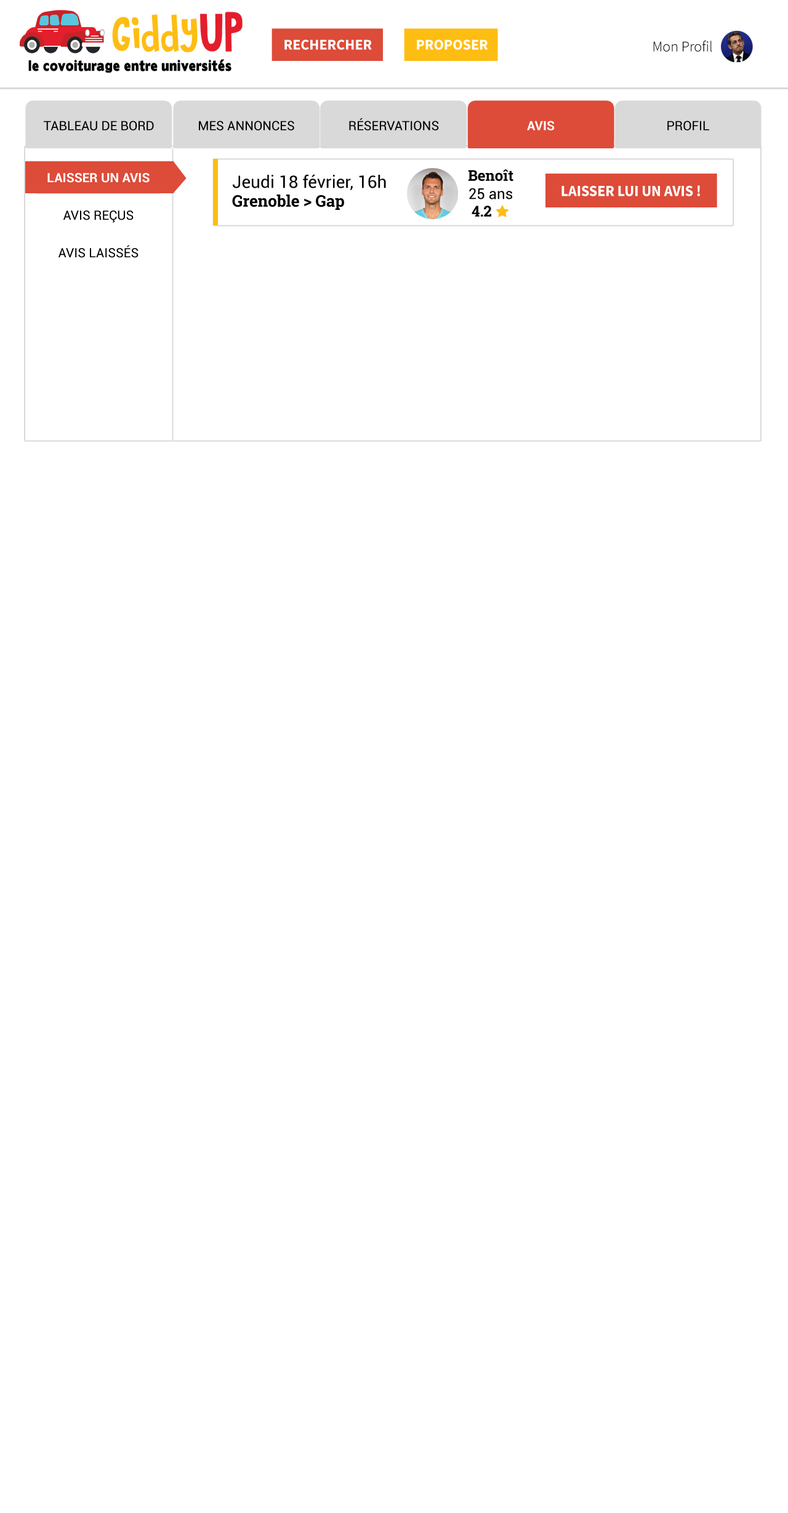
<style>
.page{position:relative;width:788px;height:1513px;background:#ffffff}
.page>*{position:absolute;margin:0}
.t1{font:14.8px "SourceSansPro-Bold";color:#ffffff;text-transform:uppercase}
.t2{font:14.8px "SourceSansPro-Light";color:#000000}
.t3{font:12.9px "Roboto-Regular";color:#000000;text-transform:uppercase}
.t4{font:12.9px "Roboto-Bold";color:#ffffff;text-transform:uppercase}
.t5{font:12.9px/18.8px "Roboto-Regular";color:#000000;text-transform:uppercase}
.t6{font:12.9px/18.8px "Roboto-Bold";color:#ffffff;text-transform:uppercase}
.t7{font:14.8px/18.2px "RobotoSlab-Bold";color:#000000}
.t8{font:14.8px/18.2px "Roboto-Regular";color:#000000}
.t9{font:17.2px/18.8px "Roboto-Regular";color:#000000}
.t10{font:16px/18.8px "RobotoSlab-Bold";color:#000000}
.t11{font:15.5px "SourceSansPro-Bold";color:#ffffff;text-transform:uppercase;scale:0.95 1}
</style>
<div class="page">
<p class="t1" style="left:284px;top:39px;width:88px;height:11px">Rechercher</p>
<p class="t1" style="left:417px;top:39px;width:71px;height:11px">proposer</p>
<p class="t2" style="left:653px;top:41px;width:59px;height:11px">Mon Profil</p>
<p class="t3" style="left:44px;top:121px;width:110px;height:10px">tableau de bord</p>
<p class="t3" style="left:199px;top:121px;width:95px;height:10px">mes annonces</p>
<p class="t3" style="left:349px;top:118px;width:90px;height:13px">réservations</p>
<p class="t4" style="left:527px;top:121px;width:28px;height:10px">avis</p>
<p class="t3" style="left:667px;top:121px;width:42px;height:10px">profil</p>
<p class="t5" style="left:47px;top:173px;width:103px;height:85px;text-align:center"><span class="t6">laisser un avis<br></span><br>avis reçus<br><br>avis laissés</p>
<p class="t7" style="left:468px;top:169px;width:45px;height:30px;text-align:center">Benoît<br><span class="t8">25 ans</span></p>
<p class="t9" style="left:232px;top:174px;width:154px;height:36px">Jeudi 18 février, 16h<br><span class="t10">Grenoble &gt; Gap</span></p>
<p class="t11" style="left:561px;top:185px;width:139px;height:11px">laisser lui un avis !</p>
</div>
